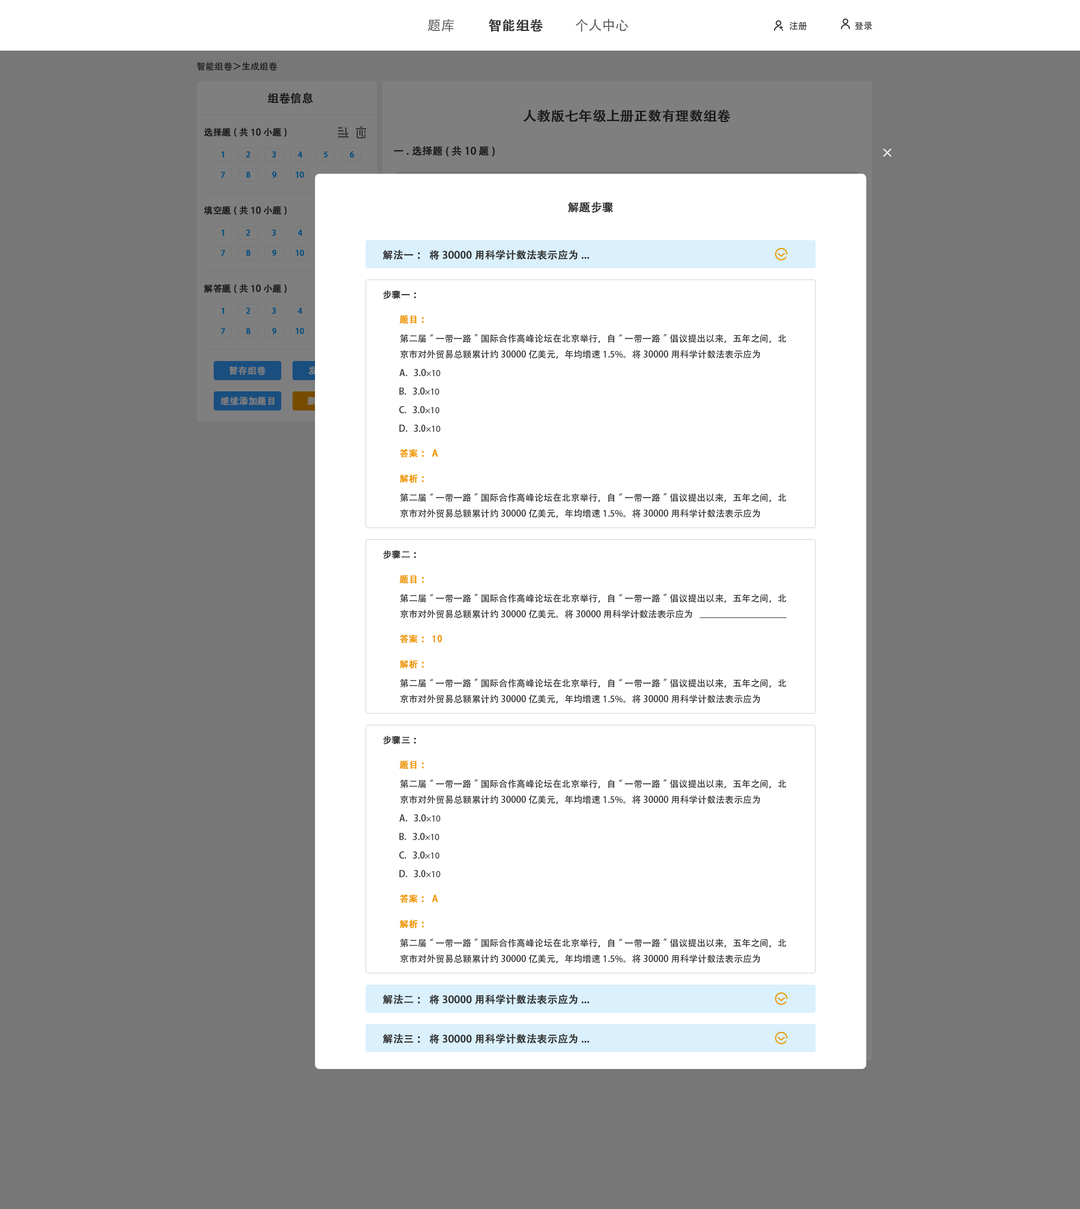
<style>
.page{position:relative;width:1080px;height:1209px;background:#777777}
.page>*{position:absolute;margin:0}
.t1{font:13.5px "AdobeHeitiStd-Regular";color:#666666}
.t2{font:13.5px "AdobeHeitiStd-Regular";color:#333333;font-weight:bold}
.t3{font:9px "AdobeHeitiStd-Regular";color:#333333}
.t4{font:9px "AdobeHeitiStd-Regular";color:#191919}
.t5{font:11.2px "AdobeHeitiStd-Regular";color:#191919;font-weight:bold}
.t6{font:13.5px "AdobeHeitiStd-Regular";color:#191919;font-weight:bold}
.t7{font:9px "AdobeHeitiStd-Regular";color:#191919;font-weight:bold}
.t8{font:10.1px "AdobeHeitiStd-Regular";color:#191919;font-weight:bold}
.t9{font:7.9px "AdobeHeitiStd-Regular";color:#024f7f;font-weight:bold}
.t10{font:11.2px "AdobeHeitiStd-Regular";color:#333333;font-weight:bold}
.t11{font:10.1px "AdobeHeitiStd-Regular";color:#333333;font-weight:bold}
.t12{font:9px "AdobeHeitiStd-Regular";color:#333333;font-weight:bold}
.t13{font:9px "AdobeHeitiStd-Regular";color:#ee9900;font-weight:bold}
.t14{font:9px "AdobeHeitiStd-Regular";color:#7f7f7f;font-weight:bold}
.t15{font:9px "MyriadPro-Regular";color:#333333}
</style>
<div class="page">
<p class="t1" style="left:428px;top:19px;width:26px;height:13px">题库</p>
<p class="t2" style="left:489px;top:19px;width:54px;height:13px">智能组卷</p>
<p class="t1" style="left:575px;top:19px;width:53px;height:13px">个人中心</p>
<p class="t3" style="left:789px;top:21px;width:18px;height:9px">注册</p>
<p class="t3" style="left:854px;top:21px;width:18px;height:9px">登录</p>
<p class="t4" style="left:197px;top:62px;width:80px;height:9px">智能组卷＞生成组卷</p>
<p class="t5" style="left:268px;top:92px;width:45px;height:12px">组卷信息</p>
<p class="t6" style="left:523px;top:109px;width:207px;height:14px">人教版七年级上册正数有理数组卷</p>
<p class="t7" style="left:204px;top:128px;width:83px;height:9px">选择题(共10小题)</p>
<p class="t8" style="left:394px;top:146px;width:101px;height:11px">一.选择题(共10题)</p>
<p class="t9" style="left:221px;top:151px;width:3px;height:7px">1</p>
<p class="t9" style="left:246px;top:151px;width:4px;height:7px">2</p>
<p class="t9" style="left:272px;top:151px;width:4px;height:7px">3</p>
<p class="t9" style="left:298px;top:151px;width:5px;height:7px">4</p>
<p class="t9" style="left:323px;top:151px;width:5px;height:7px">5</p>
<p class="t9" style="left:350px;top:151px;width:4px;height:7px">6</p>
<p class="t9" style="left:221px;top:172px;width:4px;height:6px">7</p>
<p class="t9" style="left:246px;top:172px;width:5px;height:6px">8</p>
<p class="t9" style="left:272px;top:172px;width:5px;height:6px">9</p>
<p class="t9" style="left:295px;top:172px;width:9px;height:6px">10</p>
<p class="t7" style="left:204px;top:206px;width:83px;height:9px">填空题(共10小题)</p>
<p class="t10" style="left:568px;top:201px;width:45px;height:12px">解题步骤</p>
<p class="t9" style="left:221px;top:230px;width:3px;height:6px">1</p>
<p class="t9" style="left:246px;top:230px;width:4px;height:6px">2</p>
<p class="t9" style="left:272px;top:230px;width:4px;height:6px">3</p>
<p class="t9" style="left:298px;top:230px;width:5px;height:6px">4</p>
<p class="t9" style="left:221px;top:250px;width:4px;height:6px">7</p>
<p class="t9" style="left:246px;top:250px;width:5px;height:6px">8</p>
<p class="t9" style="left:272px;top:250px;width:5px;height:6px">9</p>
<p class="t9" style="left:295px;top:250px;width:9px;height:6px">10</p>
<p class="t11" style="left:382px;top:250px;width:208px;height:10px">解法一：将30000用科学计数法表示应为...</p>
<p class="t7" style="left:204px;top:284px;width:83px;height:10px">解答题(共10小题)</p>
<p class="t12" style="left:383px;top:290px;width:33px;height:9px">步骤一：</p>
<p class="t9" style="left:221px;top:308px;width:3px;height:6px">1</p>
<p class="t9" style="left:246px;top:308px;width:4px;height:6px">2</p>
<p class="t9" style="left:272px;top:308px;width:4px;height:6px">3</p>
<p class="t9" style="left:298px;top:308px;width:5px;height:6px">4</p>
<p class="t13" style="left:399px;top:315px;width:25px;height:9px">题目：</p>
<p class="t9" style="left:221px;top:328px;width:4px;height:7px">7</p>
<p class="t9" style="left:246px;top:328px;width:5px;height:7px">8</p>
<p class="t9" style="left:272px;top:328px;width:5px;height:7px">9</p>
<p class="t9" style="left:295px;top:328px;width:9px;height:7px">10</p>
<p class="t3" style="left:400px;top:334px;width:386px;height:25px">第二届“一带一路”国际合作高峰论坛在北京举行，自“一带一路”倡议提出以来，五年之间，北京市对外贸易总额累计约30000亿美元，年均增速1.5%。将30000用科学计数法表示应为</p>
<p class="t14" style="left:230px;top:366px;width:36px;height:9px">暂存组卷</p>
<p class="t3" style="left:399px;top:369px;width:41px;height:7px">A.   3.0<span class="t15">×10</span></p>
<p class="t3" style="left:399px;top:388px;width:40px;height:7px">B.   3.0<span class="t15">×10</span></p>
<p class="t14" style="left:220px;top:397px;width:54px;height:9px">继续添加题目</p>
<p class="t3" style="left:399px;top:406px;width:40px;height:7px">C.   3.0<span class="t15">×10</span></p>
<p class="t3" style="left:399px;top:425px;width:41px;height:7px">D.   3.0<span class="t15">×10</span></p>
<p class="t13" style="left:399px;top:449px;width:39px;height:9px">答案：A</p>
<p class="t13" style="left:399px;top:474px;width:25px;height:9px">解析：</p>
<p class="t3" style="left:400px;top:493px;width:386px;height:25px">第二届“一带一路”国际合作高峰论坛在北京举行，自“一带一路”倡议提出以来，五年之间，北京市对外贸易总额累计约30000亿美元，年均增速1.5%。将30000用科学计数法表示应为</p>
<p class="t12" style="left:383px;top:550px;width:33px;height:9px">步骤二：</p>
<p class="t13" style="left:399px;top:575px;width:25px;height:9px">题目：</p>
<p class="t3" style="left:400px;top:594px;width:386px;height:25px">第二届“一带一路”国际合作高峰论坛在北京举行，自“一带一路”倡议提出以来，五年之间，北京市对外贸易总额累计约30000亿美元。将30000用科学计数法表示应为</p>
<p class="t13" style="left:399px;top:634px;width:43px;height:10px">答案：10</p>
<p class="t13" style="left:399px;top:660px;width:25px;height:9px">解析：</p>
<p class="t3" style="left:400px;top:679px;width:386px;height:25px">第二届“一带一路”国际合作高峰论坛在北京举行，自“一带一路”倡议提出以来，五年之间，北京市对外贸易总额累计约30000亿美元，年均增速1.5%。将30000用科学计数法表示应为</p>
<p class="t12" style="left:383px;top:736px;width:33px;height:9px">步骤三：</p>
<p class="t13" style="left:399px;top:760px;width:25px;height:10px">题目：</p>
<p class="t3" style="left:400px;top:780px;width:386px;height:24px">第二届“一带一路”国际合作高峰论坛在北京举行，自“一带一路”倡议提出以来，五年之间，北京市对外贸易总额累计约30000亿美元，年均增速1.5%。将30000用科学计数法表示应为</p>
<p class="t3" style="left:399px;top:814px;width:41px;height:8px">A.   3.0<span class="t15">×10</span></p>
<p class="t3" style="left:399px;top:833px;width:40px;height:7px">B.   3.0<span class="t15">×10</span></p>
<p class="t3" style="left:399px;top:852px;width:40px;height:7px">C.   3.0<span class="t15">×10</span></p>
<p class="t3" style="left:399px;top:870px;width:41px;height:8px">D.   3.0<span class="t15">×10</span></p>
<p class="t13" style="left:399px;top:894px;width:39px;height:9px">答案：A</p>
<p class="t13" style="left:399px;top:920px;width:25px;height:9px">解析：</p>
<p class="t3" style="left:400px;top:939px;width:386px;height:25px">第二届“一带一路”国际合作高峰论坛在北京举行，自“一带一路”倡议提出以来，五年之间，北京市对外贸易总额累计约30000亿美元，年均增速1.5%。将30000用科学计数法表示应为</p>
<p class="t11" style="left:382px;top:994px;width:208px;height:11px">解法二：将30000用科学计数法表示应为...</p>
<p class="t11" style="left:382px;top:1034px;width:208px;height:10px">解法三：将30000用科学计数法表示应为...</p>
</div>
